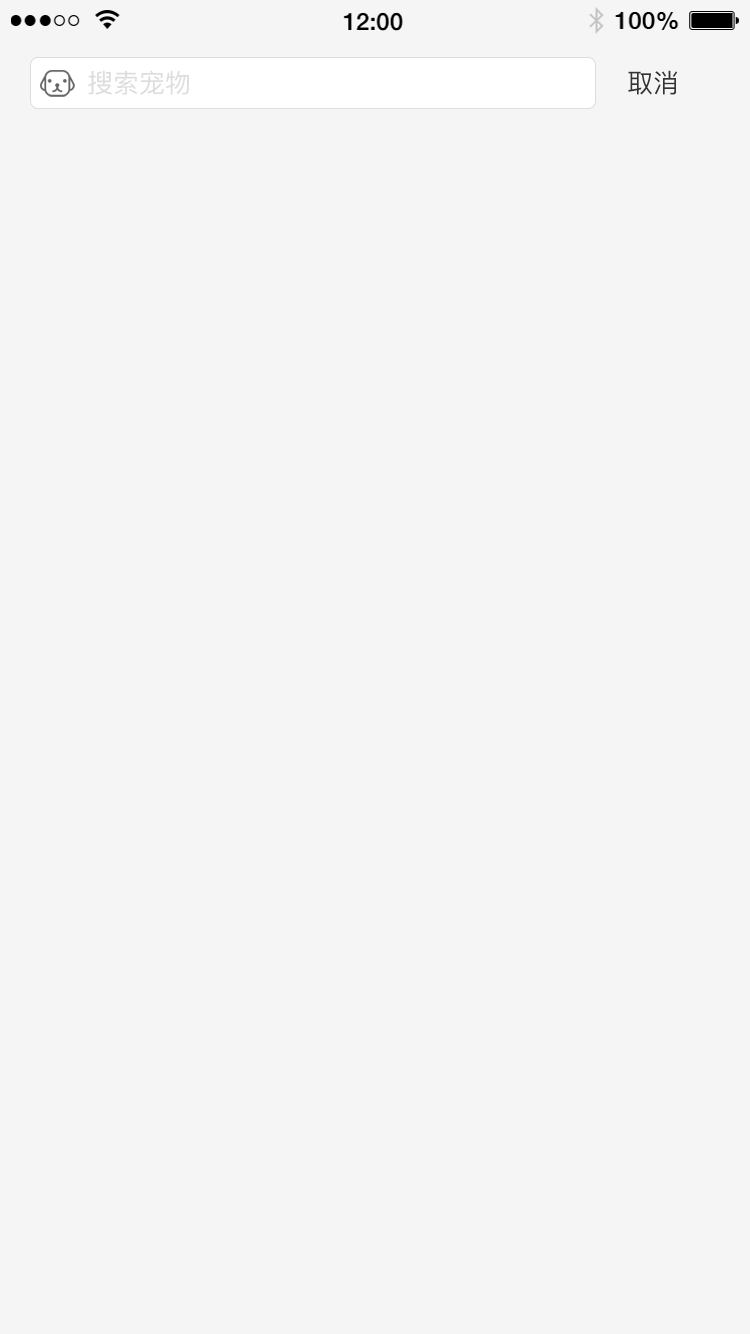
<style>
.page{position:relative;width:750px;height:1334px;background:#f5f5f5}
.page>*{position:absolute;margin:0}
.t1{font:26px "PingFangSC";color:#dddddd}
.t2{font:26px "PingFangSC";color:#333333}
</style>
<div class="page">
<p class="t1" style="left:88px;top:70px;width:101px;height:25px">搜索宠物</p>
<p class="t2" style="left:628px;top:70px;width:50px;height:25px">取消</p>
</div>
